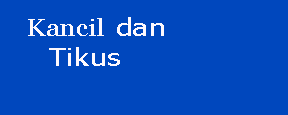
<style>
.page{position:relative;width:288px;height:115px;background:#0047bd}
.page>*{position:absolute;margin:0}
.t1{font:24px "Verdana";color:#fef9fd;scale:1.13 1}
.t2{font:24.2px "Verdana-Bold";color:#fef9fd;scale:1.13 1}
.t3{font:24.2px "Georgia";color:#fef9fd;scale:1.13 1}
</style>
<div class="page">
<p class="t1" style="left:117px;top:17px;width:47px;height:19px"><span class="t2"> </span>dan</p>
<p class="t3" style="left:28px;top:18px;width:76px;height:18px">Kancil</p>
<p class="t1" style="left:49px;top:47px;width:71px;height:19px">Tikus</p>
</div>
